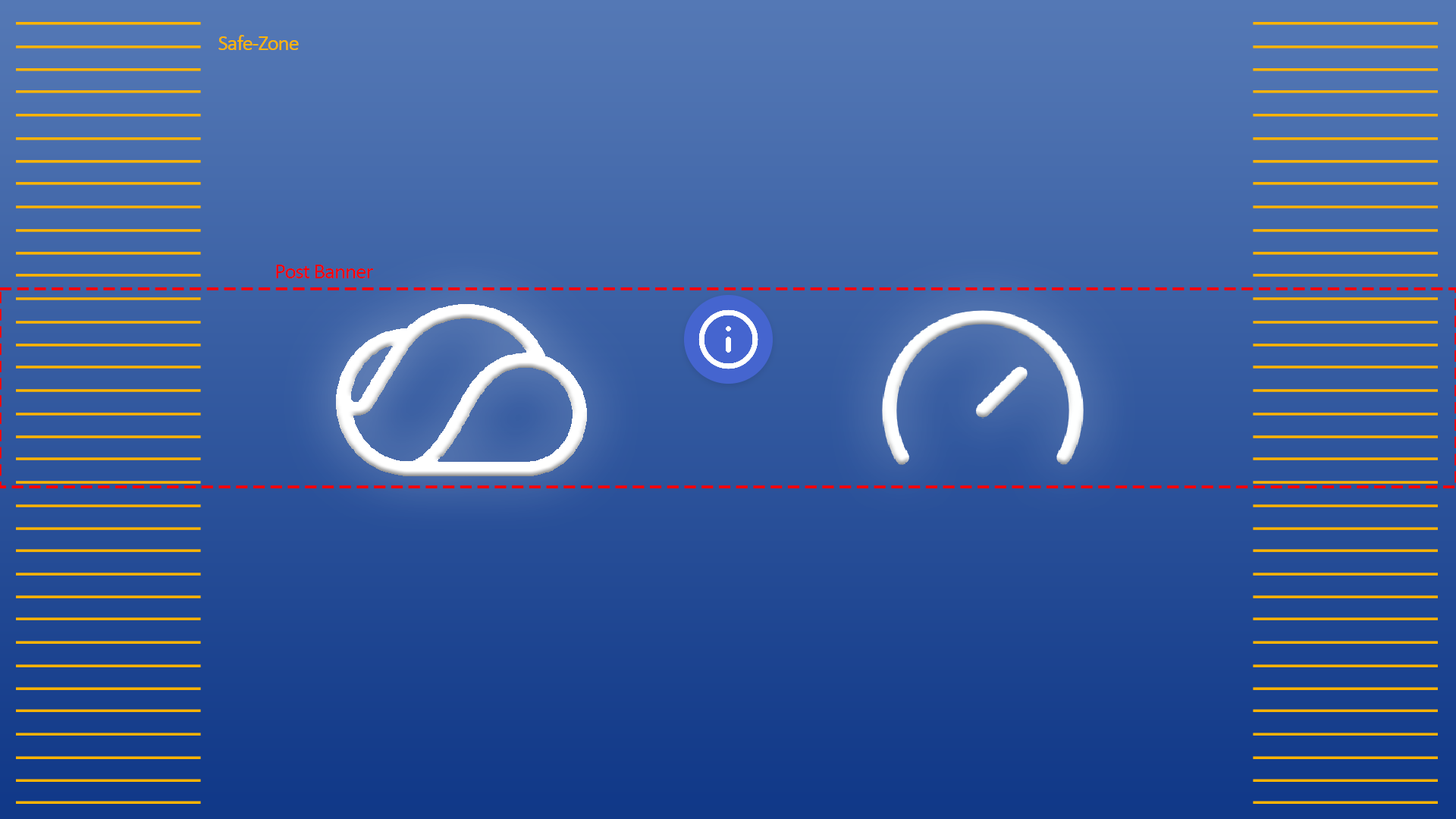
<style>
.page{position:relative;width:1456px;height:819px}
.page>*{position:absolute;margin:0}
.t1{font:22.1px "Calibri";letter-spacing:-0.04em;color:#ffb400}
.t2{font:22.1px "Calibri";letter-spacing:-0.04em;color:#ff0000}
</style>
<div class="page">
<p class="t1" style="left:218px;top:35px;width:81px;height:15px">Safe-Zone</p>
<p class="t2" style="left:276px;top:265px;width:98px;height:13px">Post Banner</p>
</div>
